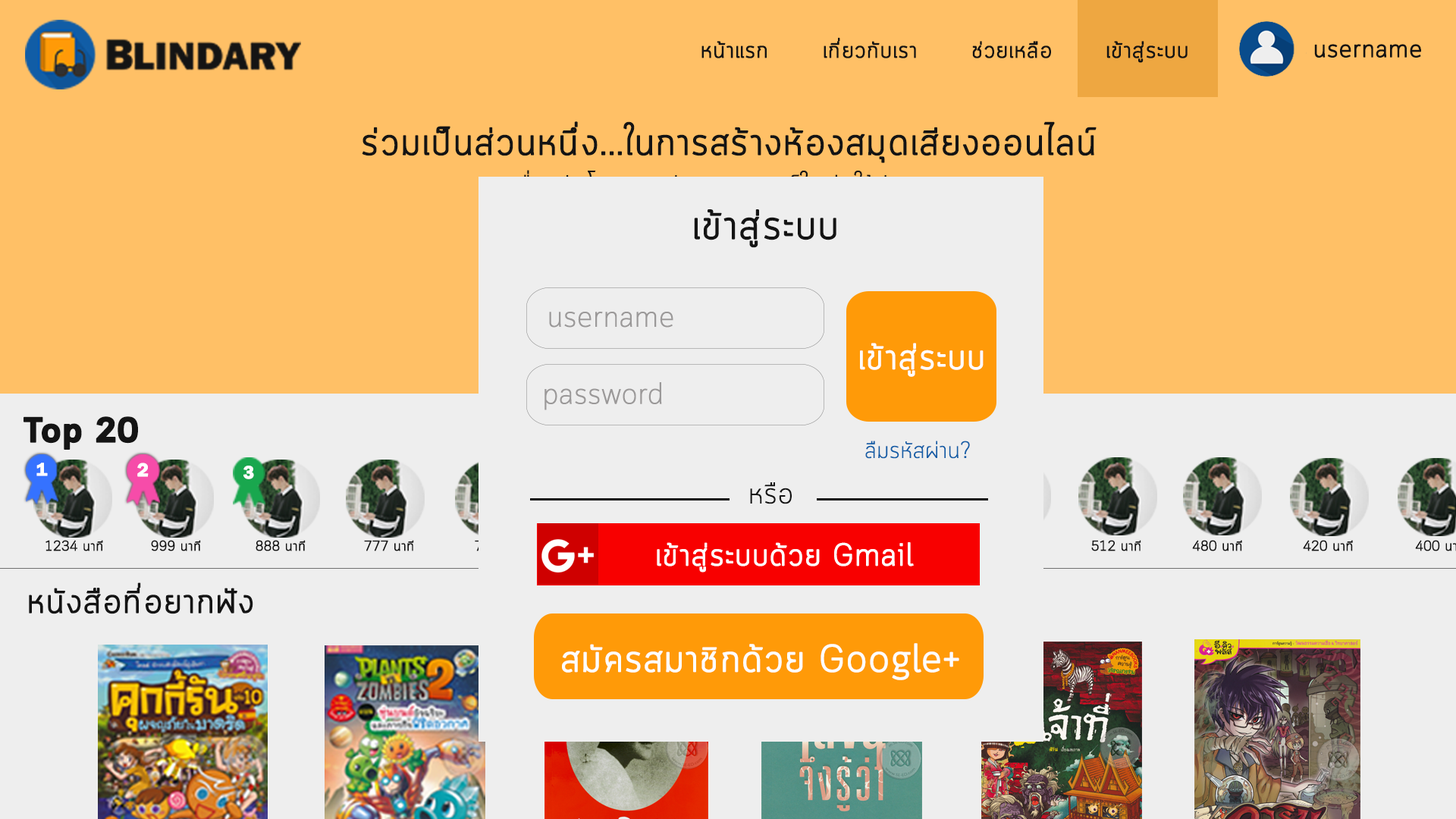
<style>
.page{position:relative;width:1456px;height:819px;background:#eeeeee}
.page>*{position:absolute;margin:0}
.t1{font:22.7px "Cloud-Light";color:#141414;font-weight:bold}
.t2{font:24.2px "Cloud-Light";color:#141414;font-weight:bold}
.t3{font:37.9px "Cloud-Light";color:#141414;font-weight:bold}
.t4{font:40.5px "Cloud-Light";color:#141414;font-weight:bold}
.t5{font:29.6px "Cloud-Light";color:#9b9999}
.t6{font:35.6px "Cloud-Light";color:#fefcfc;font-weight:bold}
.t7{font:35.1px "Cloud-Bold";color:#141414;font-weight:bold}
.t8{font:23.7px "Cloud-Light";color:#115da6}
.t9{font:18.5px "FranklinGothic-Demi";color:#fefeff;font-weight:bold}
.t10{font:19.1px "FranklinGothic-Demi";color:#fefeff;font-weight:bold}
.t11{font:29.6px "Cloud-Light";color:#141414}
.t12{font:14.1px "Cloud-Light";color:#141414;font-weight:bold}
.t13{font:31.1px "Cloud-Light";color:#fefefe;font-weight:bold}
.t14{font:34.5px "Cloud-Light";color:#141414;font-weight:bold}
.t15{font:37.9px "Cloud-Light";color:#fdfdfc;font-weight:bold}
</style>
<div class="page">
<p class="t1" style="left:701px;top:37px;width:487px;height:26px">หน้าแรก       เกี่ยวกับเรา       ช่วยเหลือ     เข้าสู่ระบบ</p>
<p class="t2" style="left:1314px;top:44px;width:107px;height:14px">username</p>
<p class="t3" style="left:362px;top:121px;width:735px;height:42px">ร่วมเป็นส่วนหนึ่ง...ในการสร้างห้องสมุดเสียงออนไลน์</p>
<p class="t4" style="left:694px;top:209px;width:142px;height:39px">เข้าสู่ระบบ</p>
<p class="t5" style="left:549px;top:312px;width:124px;height:16px">username</p>
<p class="t6" style="left:860px;top:343px;width:124px;height:34px">เข้าสู่ระบบ</p>
<p class="t5" style="left:544px;top:382px;width:118px;height:28px">password</p>
<p class="t7" style="left:24px;top:416px;width:114px;height:34px">Top 20</p>
<p class="t8" style="left:865px;top:441px;width:105px;height:18px">ลืมรหัสผ่าน?</p>
<p class="t9" style="left:36px;top:463px;width:12px;height:13px">1</p>
<p class="t10" style="left:137px;top:463px;width:12px;height:14px">2</p>
<p class="t9" style="left:243px;top:466px;width:11px;height:13px">3</p>
<p class="t11" style="left:750px;top:482px;width:42px;height:22px">หรือ</p>
<p class="t12" style="left:45px;top:540px;width:58px;height:11px">1234 นาที</p>
<p class="t12" style="left:151px;top:540px;width:50px;height:11px">999 นาที</p>
<p class="t12" style="left:256px;top:540px;width:50px;height:11px">888 นาที</p>
<p class="t13" style="left:657px;top:542px;width:257px;height:31px">เข้าสู่ระบบด้วย Gmail</p>
<p class="t14" style="left:29px;top:582px;width:224px;height:32px">หนังสือที่อยากฟัง</p>
<p class="t15" style="left:562px;top:643px;width:397px;height:37px">สมัครสมาชิกด้วย Google+</p>
</div>
